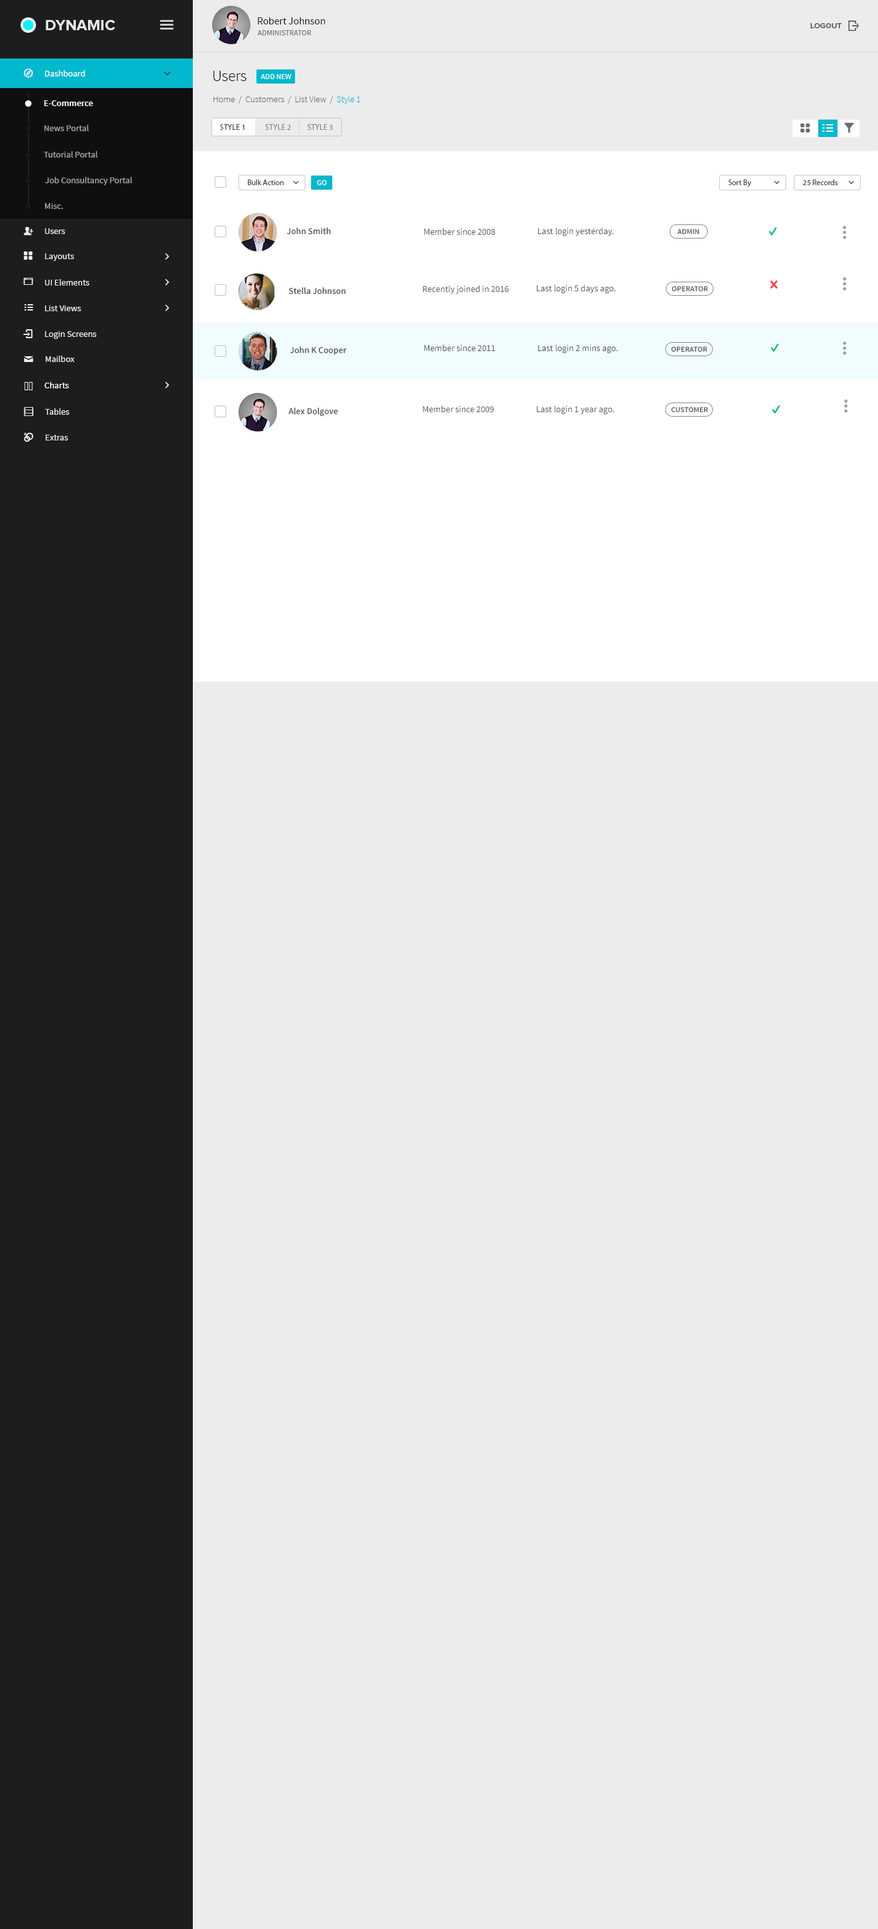
<style>
.page{position:relative;width:878px;height:1929px;background:#ececec}
.page>*{position:absolute;margin:0}
.t1{font:10.3px "SourceSansPro-Regular";color:#1d1d1d}
.t2{font:15.4px "ProximaNova-Bold";color:#eae7e7;text-transform:uppercase}
.t3{font:7.7px "ProximaNova-Semibold";color:#535353;font-variant:small-caps}
.t4{font:7.7px "SourceSansPro-Regular";color:#767575}
.t5{font:9px "SourceSansPro-Regular";color:#ffffff}
.t6{font:9px "SourceSansPro-Regular";color:#ffffff;font-variant:small-caps}
.t7{font:15.4px "SourceSansPro-Light";color:#010101}
.t8{font:7.7px "SourceSansPro-Regular";color:#ffffff;text-transform:uppercase}
.t9{font:9px "SourceSansPro-Semibold";color:#ffffff}
.t10{font:9px "SourceSansPro-Light";color:#6d6c6c}
.t11{font:9px "SourceSansPro-Light";color:#00b8ce}
.t12{font:9px "SourceSansPro-Regular";color:#a6a5a5}
.t13{font:7.7px "MyriadPro-Regular";color:#8c8b8b;text-transform:uppercase}
.t14{font:7.7px "MyriadPro-Regular";color:#4e4e4e;text-transform:uppercase}
.t15{font:8.8px "SourceSansPro-Regular";color:#a6a5a5}
.t16{font:7.7px "MyriadPro-Regular";color:#4e4e4e}
.t17{font:9px "SourceSansPro-Regular";color:#ebebeb}
.t18{font:9px "SourceSansPro-Semibold";color:#585858}
.t19{font:9px "SourceSansPro-Regular";color:#565555}
.t20{font:7.7px "SourceSansPro-Semibold";color:#585858;text-transform:uppercase}
.t21{font:8.8px "SourceSansPro-Regular";color:#ebebeb}
</style>
<div class="page">
<p class="t1" style="left:258px;top:17px;width:67px;height:7px">Robert Johnson</p>
<p class="t2" style="left:46px;top:20px;width:69px;height:10px">DYNAMIC</p>
<p class="t3" style="left:811px;top:23px;width:31px;height:5px">LOGOUT</p>
<p class="t4" style="left:257px;top:30px;width:54px;height:5px">ADMINISTRATOR</p>
<p class="t5" style="left:45px;top:70px;width:40px;height:6px"><span class="t6">D</span>ashboard</p>
<p class="t7" style="left:213px;top:71px;width:33px;height:10px">Users</p>
<p class="t8" style="left:260px;top:74px;width:31px;height:5px">add new</p>
<p class="t9" style="left:44px;top:100px;width:49px;height:6px">E-Commerce</p>
<p class="t10" style="left:213px;top:96px;width:148px;height:8px">Home  /  Customers  /  List View  /  <span class="t11">Style 1</span></p>
<p class="t12" style="left:44px;top:125px;width:45px;height:6px">News Portal</p>
<p class="t13" style="left:220px;top:124px;width:113px;height:6px"><span class="t14">Style 1            </span>Style 2          Style 3</p>
<p class="t15" style="left:44px;top:151px;width:54px;height:7px">Tutorial Portal</p>
<p class="t15" style="left:45px;top:177px;width:87px;height:8px">Job Consultancy Portal</p>
<p class="t16" style="left:248px;top:179px;width:36px;height:6px">Bulk Action</p>
<p class="t8" style="left:317px;top:180px;width:10px;height:5px">go</p>
<p class="t16" style="left:728px;top:179px;width:24px;height:8px">Sort By</p>
<p class="t16" style="left:803px;top:179px;width:35px;height:6px">25 Records</p>
<p class="t15" style="left:45px;top:203px;width:18px;height:6px">Misc.</p>
<p class="t17" style="left:45px;top:228px;width:20px;height:6px">Users</p>
<p class="t18" style="left:287px;top:228px;width:44px;height:7px">John Smith</p>
<p class="t19" style="left:424px;top:228px;width:72px;height:7px">Member since 2008</p>
<p class="t19" style="left:538px;top:228px;width:76px;height:9px">Last login yesterday.</p>
<p class="t20" style="left:678px;top:229px;width:21px;height:5px">admin</p>
<p class="t17" style="left:45px;top:253px;width:29px;height:8px">Layouts</p>
<p class="t17" style="left:45px;top:279px;width:44px;height:6px">UI Elements</p>
<p class="t18" style="left:289px;top:287px;width:57px;height:7px">Stella Johnson</p>
<p class="t19" style="left:423px;top:285px;width:86px;height:9px">Recently joined in 2016</p>
<p class="t19" style="left:537px;top:285px;width:79px;height:9px">Last login 5 days ago.</p>
<p class="t20" style="left:672px;top:286px;width:36px;height:5px">operator</p>
<p class="t17" style="left:45px;top:305px;width:36px;height:6px">List Views</p>
<p class="t17" style="left:45px;top:331px;width:51px;height:8px">Login Screens</p>
<p class="t18" style="left:290px;top:346px;width:56px;height:9px">John K Cooper</p>
<p class="t19" style="left:424px;top:345px;width:71px;height:7px">Member since 2011</p>
<p class="t19" style="left:538px;top:345px;width:80px;height:9px">Last login 2 mins ago.</p>
<p class="t20" style="left:671px;top:346px;width:36px;height:6px">operator</p>
<p class="t17" style="left:46px;top:356px;width:29px;height:6px">Mailbox</p>
<p class="t5" style="left:44px;top:382px;width:25px;height:6px">Charts</p>
<p class="t21" style="left:45px;top:408px;width:24px;height:7px">Tables</p>
<p class="t18" style="left:289px;top:408px;width:49px;height:8px">Alex Dolgove</p>
<p class="t19" style="left:423px;top:406px;width:71px;height:7px">Member since 2009</p>
<p class="t19" style="left:537px;top:406px;width:78px;height:9px">Last login 1 year ago.</p>
<p class="t20" style="left:671px;top:407px;width:37px;height:5px">customer</p>
<p class="t21" style="left:46px;top:435px;width:22px;height:5px">Extras</p>
</div>
